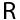
<style>
.page{position:relative;width:20px;height:20px;background:#ffffff}
.page>*{position:absolute;margin:0}
.t1{font:25px "MyriadPro-Regular";color:#000000}
</style>
<div class="page">
<p class="t1" style="left:4px;top:2px;width:12px;height:17px">R</p>
</div>
